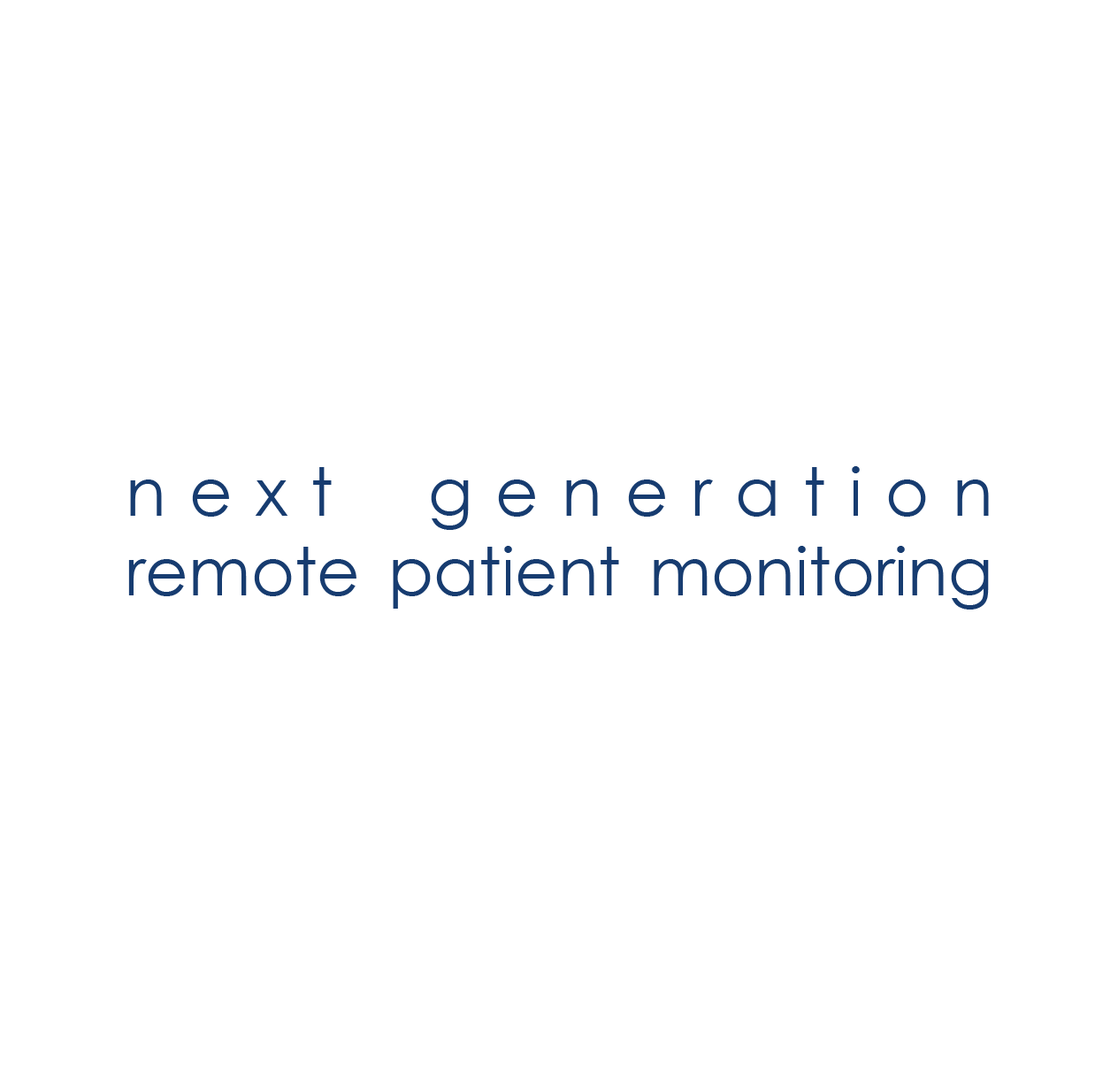
<style>
.page{position:relative;width:1118px;height:1066px;background:#ffffff}
.page>*{position:absolute;margin:0}
.t1{font:66.4px "CenturyGothic";color:#173c70}
.t2{font:66.4px "CenturyGothic";letter-spacing:0.35em;color:#173c70}
</style>
<div class="page">
<p class="t1" style="left:128px;top:466px;width:861px;height:144px;text-align:justify"><span class="t2">next generation<br></span>remote patient monitoring</p>
</div>
